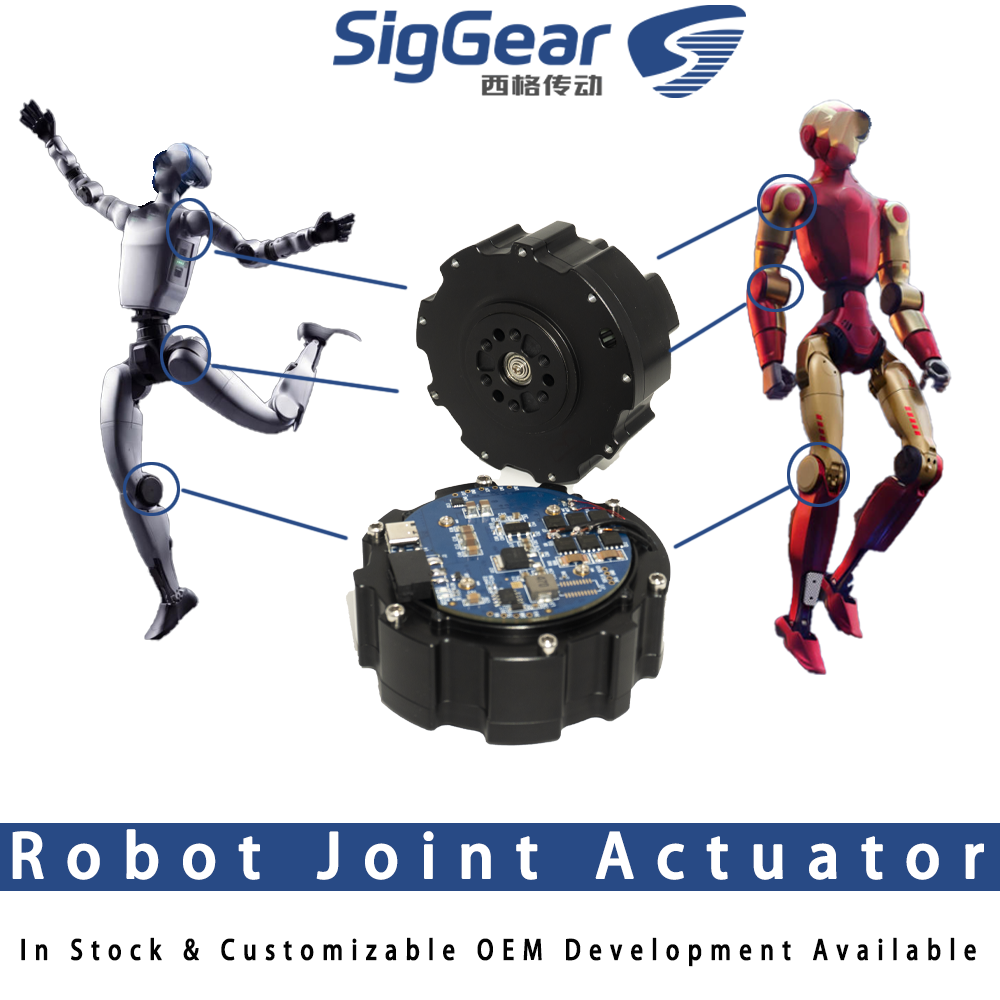
<style>
.page{position:relative;width:1000px;height:1000px;background:#ffffff}
.page>*{position:absolute;margin:0}
.t1{font:59.6px "AdobeHeitiStd-Regular";letter-spacing:0.34em;color:#ffffff;font-weight:bold}
.t2{font:26.9px "AdobeHeitiStd-Regular";letter-spacing:0.34em;color:#030303;font-weight:bold;scale:0.85 1}
</style>
<div class="page">
<p class="t1" style="left:12px;top:829px;width:972px;height:51px">Robot Joint Actuator</p>
<p class="t2" style="left:21px;top:937px;width:955px;height:30px">In Stock &amp; Customizable OEM Development Available</p>
</div>
